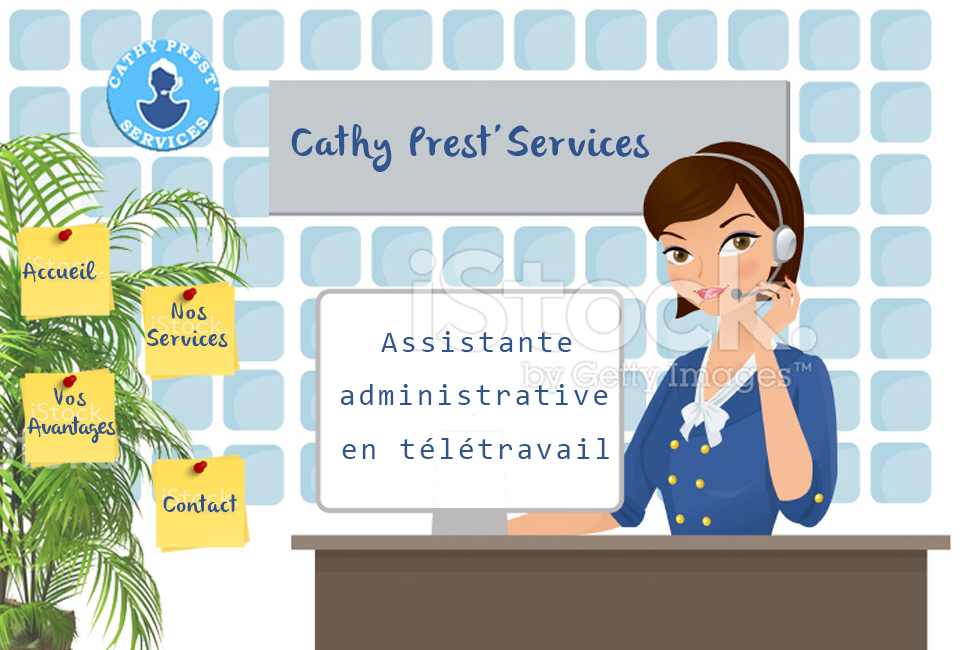
<style>
.page{position:relative;width:980px;height:650px;background:#ffffff}
.page>*{position:absolute;margin:0}
.t1{font:42px "olivier";letter-spacing:0.05em;color:#30548e}
.t2{font:24px "olivier";letter-spacing:0.05em;color:#30548e}
.t3{font:30px "Consolas";letter-spacing:0.1em;color:#30548e}
.t4{font:24px "olivier";letter-spacing:0.1em;color:#30548e}
.t5{font:24px "olivier";letter-spacing:-0.02em;color:#30548e}
</style>
<div class="page">
<p class="t1" style="left:291px;top:124px;width:358px;height:48px">Cathy Prest’Services</p>
<p class="t2" style="left:22px;top:260px;width:75px;height:23px">Accueil</p>
<p class="t2" style="left:146px;top:328px;width:82px;height:20px">Services</p>
<p class="t3" style="left:381px;top:331px;width:191px;height:21px">Assistante</p>
<p class="t4" style="left:54px;top:388px;width:32px;height:19px">Vos</p>
<p class="t3" style="left:341px;top:384px;width:267px;height:21px">administrative</p>
<p class="t5" style="left:27px;top:416px;width:89px;height:28px">Avantages</p>
<p class="t3" style="left:342px;top:438px;width:267px;height:21px">en télétravail</p>
<p class="t2" style="left:163px;top:494px;width:75px;height:19px">Contact</p>
</div>
